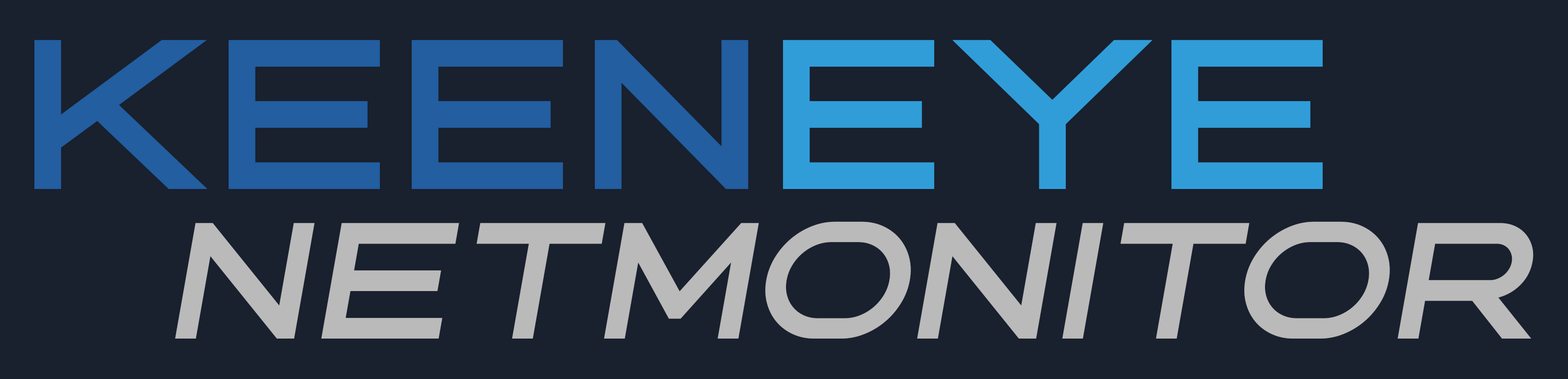
<style>
.page{position:relative;width:1568px;height:379px;background:#19202e}
.page>*{position:absolute;margin:0}
.t1{font:226.2px "VastinePersonalUseOnly-Reg";color:#225ea0}
.t2{font:226.2px "VastinePersonalUseOnly-Reg";color:#309dd8}
.t3{font:151.7px "VastinePersonalUseOnly-Reg";color:#bababa;font-style:italic}
</style>
<div class="page">
<p class="t1" style="left:34px;top:40px;width:1289px;height:149px">KEEN<span class="t2">EYE</span></p>
<p class="t3" style="left:175px;top:222px;width:1359px;height:117px">NETMONITOR</p>
</div>
